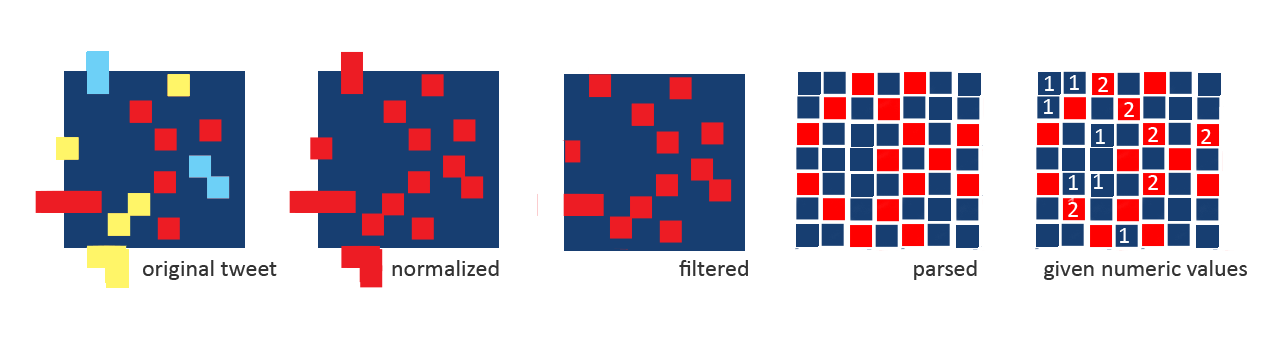
<style>
.page{position:relative;width:1280px;height:343px;background:#ffffff}
.page>*{position:absolute;margin:0}
.t1{font:24px "Calibri";color:#333333}
</style>
<div class="page">
<p class="t1" style="left:143px;top:260px;width:1104px;height:20px">original tweet                     normalized                                 filtered                              parsed            given numeric values</p>
</div>
